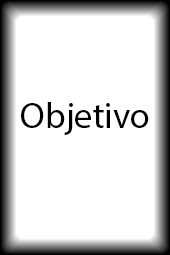
<style>
.page{position:relative;width:170px;height:255px;background:#ffffff}
.page>*{position:absolute;margin:0}
.t1{font:36px "MyriadPro-Regular";color:#000000}
</style>
<div class="page">
<p class="t1" style="left:21px;top:102px;width:128px;height:33px">Objetivo</p>
</div>
